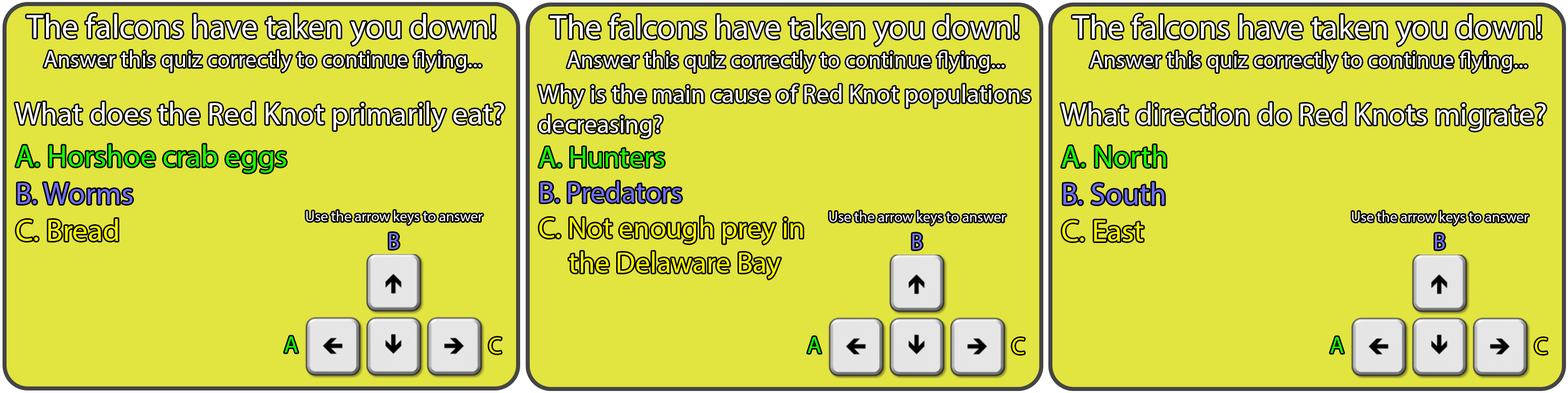
<style>
.page{position:relative;width:1568px;height:393px;background:#e2e440}
.page>*{position:absolute;margin:0}
.t1{font:33.4px "MyriadPro-Regular";color:#ffffff}
.t2{font:23.3px "MyriadPro-Regular";color:#ffffff}
.t3{font:25.3px "MyriadPro-Regular";color:#ffffff}
.t4{font:30.9px "MyriadPro-Regular";color:#ffffff}
.t5{font:30.9px "MyriadPro-Regular";color:#18ff00}
.t6{font:30.9px "MyriadPro-Regular";color:#6e6ef9}
.t7{font:30.9px "MyriadPro-Regular";color:#fff600}
.t8{font:14.7px "MyriadPro-Regular";color:#ffffff}
.t9{font:23.3px "MyriadPro-Regular";color:#7171ff}
.t10{font:23.3px "MyriadPro-Regular";color:#18ff00}
.t11{font:23.3px "MyriadPro-Regular";color:#fff600}
</style>
<div class="page">
<p class="t1" style="left:26px;top:14px;width:469px;height:31px">The falcons have taken you down!</p>
<p class="t1" style="left:549px;top:14px;width:470px;height:32px">The falcons have taken you down!</p>
<p class="t1" style="left:1072px;top:14px;width:469px;height:32px">The falcons have taken you down!</p>
<p class="t2" style="left:44px;top:51px;width:437px;height:21px">Answer this quiz correctly to continue flying...</p>
<p class="t2" style="left:567px;top:51px;width:437px;height:22px">Answer this quiz correctly to continue flying...</p>
<p class="t2" style="left:1090px;top:51px;width:437px;height:22px">Answer this quiz correctly to continue flying...</p>
<p class="t3" style="left:538px;top:84px;width:492px;height:54px">Why is the main cause of Red Knot populations<br>decreasing?</p>
<p class="t4" style="left:15px;top:102px;width:489px;height:29px">What does the Red Knot primarily eat?</p>
<p class="t4" style="left:1061px;top:103px;width:485px;height:28px">What direction do Red Knots migrate?</p>
<p class="t5" style="left:16px;top:145px;width:270px;height:96px">A. Horshoe crab eggs<br><span class="t6">B. Worms<br></span><span class="t7">C. Bread</span></p>
<p class="t8" style="left:306px;top:211px;width:177px;height:14px">Use the arrow keys to answer</p>
<p class="t8" style="left:829px;top:211px;width:177px;height:14px">Use the arrow keys to answer</p>
<p class="t8" style="left:1352px;top:211px;width:177px;height:14px">Use the arrow keys to answer</p>
<p class="t9" style="left:389px;top:233px;width:10px;height:16px">B</p>
<p class="t9" style="left:912px;top:234px;width:10px;height:16px">B</p>
<p class="t9" style="left:1435px;top:234px;width:10px;height:16px">B</p>
<p class="t10" style="left:285px;top:337px;width:13px;height:16px">A</p>
<p class="t11" style="left:489px;top:338px;width:12px;height:16px">C</p>
<p class="t10" style="left:808px;top:337px;width:13px;height:16px">A</p>
<p class="t11" style="left:1012px;top:338px;width:13px;height:16px">C</p>
<p class="t10" style="left:1330px;top:337px;width:14px;height:16px">A</p>
<p class="t11" style="left:1535px;top:338px;width:12px;height:16px">C</p>
</div>
